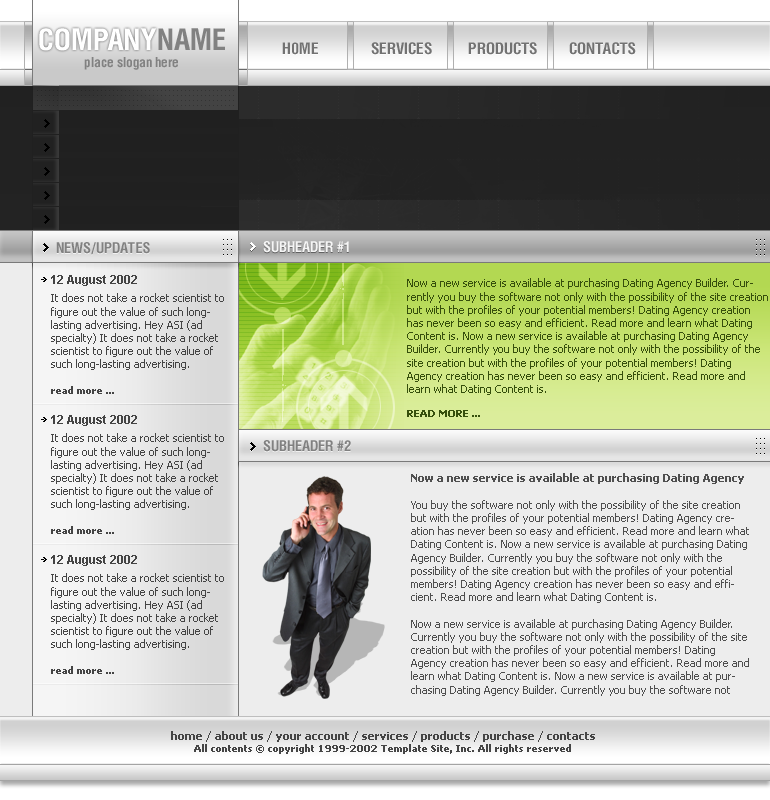
<style>
.page{position:relative;width:770px;height:800px}
.page>*{position:absolute;margin:0}
.t1{font:30px "HeliosCond-Bold";color:#ffffff;text-transform:uppercase}
.t2{font:30px "HeliosCond-Bold";color:#818181;text-transform:uppercase}
.t3{font:16px "HeliosCond-Bold";color:#727272;text-transform:uppercase}
.t4{font:14px "HeliosCond-Bold";color:#818181}
.t5{font:15px "HeliosCond-Bold";color:#818181;text-transform:uppercase}
.t6{font:15px "HeliosCond-Bold";color:#f5f5f5;text-transform:uppercase}
.t7{font:12px "Arial-BoldMT";color:#444444}
.t8{font:11px "Tahoma";color:#364f0c}
.t9{font:10px "Tahoma-Bold";color:#364f0c}
.t10{font:11px "Tahoma";color:#444444}
.t11{font:10px "Tahoma-Bold";color:#444444}
.t12{font:11px "Tahoma";color:#4f4f4f}
.t13{font:11px "Tahoma-Bold";color:#4f4f4f}
.t14{font:10px "Tahoma-Bold";color:#4f4f4f}
.t15{font:11px "Tahoma-Bold";color:#454545}
.t16{font:10px "Tahoma-Bold";color:#454545}
</style>
<div class="page">
<p class="t1" style="left:39px;top:28px;width:118px;height:23px">COMPANY</p>
<p class="t2" style="left:158px;top:28px;width:67px;height:22px">NAME</p>
<p class="t3" style="left:282px;top:42px;width:354px;height:13px">H0ME             services         products        contacts</p>
<p class="t4" style="left:84px;top:57px;width:94px;height:13px">place slogan here</p>
<p class="t5" style="left:56px;top:242px;width:94px;height:13px">news/updates</p>
<p class="t6" style="left:263px;top:241px;width:86px;height:12px">subheader #1</p>
<p class="t7" style="left:51px;top:275px;width:86px;height:11px">12 August 2002</p>
<p class="t8" style="left:407px;top:278px;width:361px;height:139px">Now a new service is available at purchasing Dating Agency Builder. Currently you buy the software not only with the possibility of the site creation but with the profiles of your potential members! Dating Agency creation has never been so easy and efficient. Read more and learn what Dating Content is. Now a new service is available at purchasing Dating Agency Builder. Currently you buy the software not only with the possibility of the site creation but with the profiles of your potential members! Dating Agency creation has never been so easy and efficient. Read more and learn what Dating Content is. <br><br><span class="t9">READ MORE ...</span></p>
<p class="t10" style="left:51px;top:293px;width:173px;height:101px">It does not take a rocket scientist to figure out the value of such long-lasting advertising. Hey ASI (ad specialty) It does not take a rocket scientist to figure out the value of such long-lasting advertising. <br><br><span class="t11">read more ...</span></p>
<p class="t7" style="left:51px;top:415px;width:86px;height:11px">12 August 2002</p>
<p class="t10" style="left:51px;top:433px;width:173px;height:101px">It does not take a rocket scientist to figure out the value of such long-lasting advertising. Hey ASI (ad specialty) It does not take a rocket scientist to figure out the value of such long-lasting advertising. <br><br><span class="t11">read more ...</span></p>
<p class="t5" style="left:263px;top:440px;width:88px;height:12px">subheader #2</p>
<p class="t12" style="left:411px;top:473px;width:338px;height:223px"><span class="t13">Now a new service is available at purchasing Dating Agency <br><br></span>You buy the software not only with the possibility of the site creation but with the profiles of your potential members! Dating Agency creation has never been so easy and efficient. Read more and learn what Dating Content is. Now a new service is available at purchasing Dating Agency Builder. Currently you buy the software not only with the possibility of the site creation but with the profiles of your potential members! Dating Agency creation has never been so easy and efficient. Read more and learn what Dating Content is. <br><br>Now a new service is available at purchasing Dating Agency Builder. Currently you buy the software not only with the possibility of the site creation but with the profiles of your potential members! Dating Agency creation has never been so easy and efficient. Read more and learn what Dating Content is. Now a new service is available at purchasing Dating Agency Builder. Currently you buy the software not only with the possibility of the site creation but with the profiles of your potential members! Dating Agency creation has never been so easy and efficient. Read more and learn what Dating Content is. <br><br><span class="t14">READ MORE ...</span></p>
<p class="t7" style="left:51px;top:555px;width:86px;height:11px">12 August 2002</p>
<p class="t10" style="left:51px;top:573px;width:173px;height:101px">It does not take a rocket scientist to figure out the value of such long-lasting advertising. Hey ASI (ad specialty) It does not take a rocket scientist to figure out the value of such long-lasting advertising. <br><br><span class="t11">read more ...</span></p>
<p class="t15" style="left:171px;top:731px;width:424px;height:23px;text-align:center">home / about us / your account / services / products / purchase / contacts<br><span class="t16">All contents © copyright 1999-2002 Template Site, Inc. All rights reserved</span></p>
</div>
